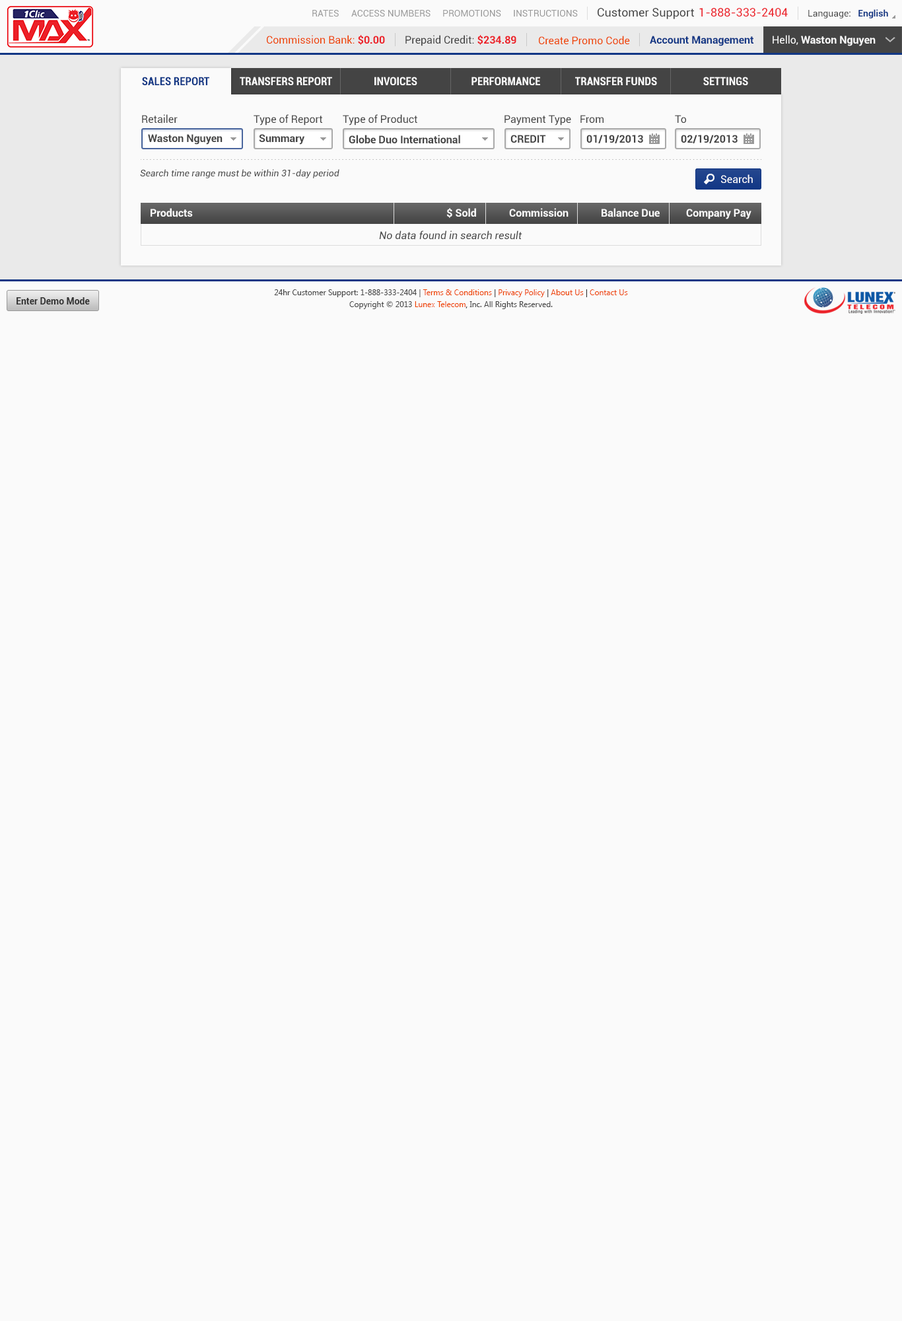
<style>
.page{position:relative;width:902px;height:1321px;background:#fafafa}
.page>*{position:absolute;margin:0}
.t1{font:9.2px "Roboto-Regular";color:#999999}
.t2{font:11.6px "Roboto-Regular";color:#444444}
.t3{font:11.6px "Roboto-Regular";color:#ec2029}
.t4{font:9.2px "Roboto-Regular";color:#444444}
.t5{font:9.2px "Roboto-Bold";color:#123785}
.t6{font:10.6px "Roboto-Regular";color:#ee4400}
.t7{font:10.6px "Roboto-Bold";color:#ec2028}
.t8{font:10.6px "Roboto-Regular";color:#444444}
.t9{font:10.6px "Roboto-Bold";color:#123785}
.t10{font:10.6px "Roboto-Bold";color:#fafafa}
.t11{font:10.6px "Roboto-Regular";color:#fafafa}
.t12{font:11.2px "Roboto-BoldCondensed";color:#123785}
.t13{font:11.2px "Roboto-BoldCondensed";color:#fafafa}
.t14{font:10.6px "Roboto-Bold";color:#444444}
.t15{font:9.2px "Roboto-Italic";color:#444444}
.t16{font:10.6px "Roboto-Regular";color:#ffffff}
.t17{font:10.6px "Roboto-Italic";color:#444444}
.t18{font:7.9px/11.9px "SegoeUI";color:#444444}
.t19{font:7.9px/11.9px "SegoeUI";color:#ee4400}
.t20{font:7.9px/11.9px "SegoeUI";color:#333333}
.t21{font:9.2px "Roboto-Bold";color:#333333}
</style>
<div class="page">
<p class="t1" style="left:312px;top:10px;width:27px;height:7px">RATES</p>
<p class="t1" style="left:351px;top:10px;width:80px;height:7px">ACCESS NUMBERS</p>
<p class="t1" style="left:443px;top:10px;width:58px;height:7px">PROMOTIONS</p>
<p class="t1" style="left:514px;top:10px;width:64px;height:7px">INSTRUCTIONS</p>
<p class="t2" style="left:598px;top:8px;width:96px;height:11px">Customer Support</p>
<p class="t3" style="left:700px;top:8px;width:88px;height:9px">1-888-333-2404</p>
<p class="t4" style="left:809px;top:9px;width:80px;height:9px">Language:   <span class="t5">English</span></p>
<p class="t6" style="left:267px;top:35px;width:118px;height:10px">Commission Bank: <span class="t7">$0.00</span></p>
<p class="t8" style="left:406px;top:35px;width:111px;height:11px">Prepaid Credit: <span class="t7">$234.89</span></p>
<p class="t6" style="left:539px;top:36px;width:91px;height:9px">Create Promo Code</p>
<p class="t9" style="left:650px;top:36px;width:104px;height:10px">Account Management</p>
<p class="t10" style="left:773px;top:35px;width:103px;height:11px"><span class="t11">Hello, </span>Waston Nguyen</p>
<p class="t12" style="left:142px;top:77px;width:67px;height:8px">SALES REPORT</p>
<p class="t13" style="left:240px;top:77px;width:92px;height:8px">TRANSFERS REPORT</p>
<p class="t13" style="left:375px;top:77px;width:43px;height:8px">INVOICES</p>
<p class="t13" style="left:472px;top:77px;width:68px;height:8px">PERFORMANCE</p>
<p class="t13" style="left:575px;top:77px;width:82px;height:8px">TRANSFER FUNDS</p>
<p class="t13" style="left:704px;top:77px;width:45px;height:8px">SETTINGS</p>
<p class="t8" style="left:142px;top:114px;width:36px;height:10px">Retailer</p>
<p class="t8" style="left:254px;top:114px;width:69px;height:12px">Type of Report</p>
<p class="t8" style="left:343px;top:114px;width:75px;height:12px">Type of Product</p>
<p class="t8" style="left:505px;top:115px;width:66px;height:11px">Payment Type</p>
<p class="t8" style="left:581px;top:115px;width:23px;height:8px">From</p>
<p class="t8" style="left:675px;top:115px;width:11px;height:8px">To</p>
<p class="t14" style="left:148px;top:134px;width:75px;height:11px">Waston Nguyen</p>
<p class="t14" style="left:259px;top:134px;width:46px;height:11px">Summary</p>
<p class="t14" style="left:349px;top:135px;width:111px;height:9px">Globe Duo International</p>
<p class="t14" style="left:511px;top:135px;width:35px;height:8px">CREDIT</p>
<p class="t14" style="left:587px;top:135px;width:56px;height:8px">01/19/2013</p>
<p class="t14" style="left:681px;top:135px;width:57px;height:8px">02/19/2013</p>
<p class="t15" style="left:140px;top:169px;width:200px;height:9px">Search time range must be within 31-day period</p>
<p class="t16" style="left:721px;top:174px;width:32px;height:10px">Search</p>
<p class="t10" style="left:151px;top:208px;width:42px;height:9px">Products</p>
<p class="t10" style="left:447px;top:208px;width:29px;height:10px">$ Sold</p>
<p class="t10" style="left:509px;top:208px;width:60px;height:9px">Commission</p>
<p class="t10" style="left:602px;top:208px;width:58px;height:9px">Balance Due</p>
<p class="t10" style="left:686px;top:209px;width:66px;height:10px">Company Pay</p>
<p class="t17" style="left:379px;top:231px;width:144px;height:9px">No data found in search result</p>
<p class="t18" style="left:274px;top:289px;width:354px;height:20px;text-align:center">24hr Customer Support: 1-888-333-2404 | <span class="t19">Terms &amp; Conditions</span><span class="t20"> | </span><span class="t19">Privacy Policy</span><span class="t20"> | </span><span class="t19">About Us</span><span class="t20"> | </span><span class="t19">Contact Us<br></span>Copyright © 2013 <span class="t19">Lunex Telecom</span><span class="t20">,</span> Inc. All Rights Reserved.</p>
<p class="t21" style="left:17px;top:297px;width:73px;height:8px">Enter Demo Mode</p>
</div>
